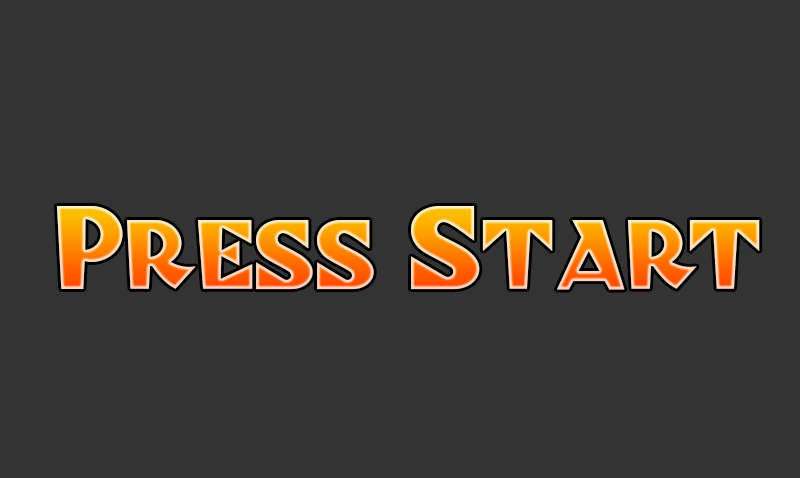
<style>
.page{position:relative;width:800px;height:478px;background:#333333}
.page>*{position:absolute;margin:0}
.t1{font:111.1px "BlitzkriegNF"}
</style>
<div class="page">
<p class="t1" style="left:57px;top:206px;width:703px;height:84px">Press Start</p>
</div>
